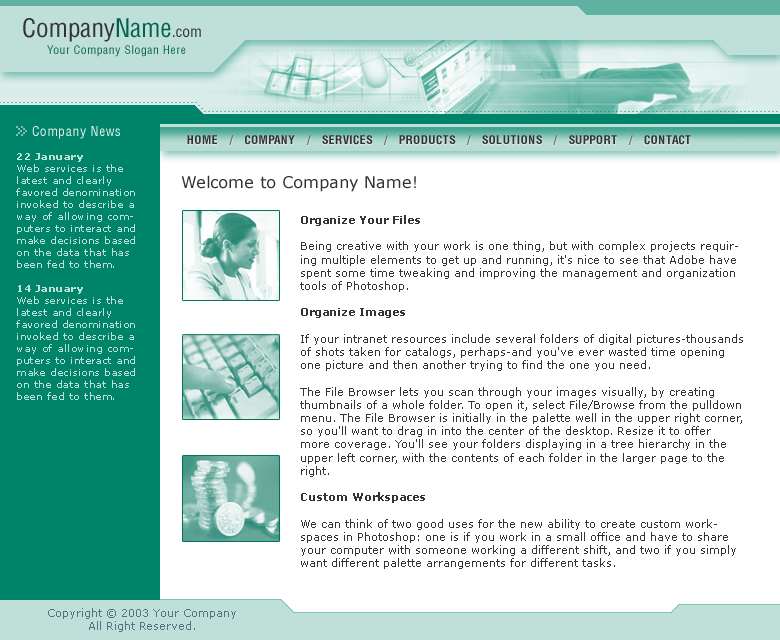
<style>
.page{position:relative;width:780px;height:640px;background:#ffffff}
.page>*{position:absolute;margin:0}
.t1{font:26px "HeliosCond";color:#333333}
.t2{font:26px "HeliosCond";color:#05614e}
.t3{font:16px "HeliosCond";color:#333333}
.t4{font:12px "HeliosCond";letter-spacing:0.05em;color:#116957}
.t5{font:14px "HeliosCond";letter-spacing:0.05em;color:#e6f3f0}
.t6{font:12px "HeliosCondBold";letter-spacing:0.05em;color:#333333;text-transform:uppercase}
.t7{font:12px "HeliosCondBold";letter-spacing:0.05em;color:#666666;text-transform:uppercase}
.t8{font:10px "Verdana";letter-spacing:0.05em;color:#bfe0d9}
.t9{font:10px "Verdana-Bold";letter-spacing:0.05em;color:#bfe0d9}
.t10{font:16px "Verdana";color:#333333}
.t11{font:11px "Verdana";color:#333333}
.t12{font:11px "Verdana-Bold";color:#333333}
.t13{font:11px "Verdana";color:#567280}
</style>
<div class="page">
<p class="t1" style="left:23px;top:18px;width:178px;height:24px">Company<span class="t2">Name</span><span class="t3">.com</span></p>
<p class="t4" style="left:47px;top:45px;width:139px;height:12px">Your Company Slogan Here</p>
<p class="t5" style="left:32px;top:126px;width:88px;height:13px">Company News</p>
<p class="t6" style="left:187px;top:135px;width:504px;height:10px">HOME   <span class="t7">/</span>   Company   <span class="t7">/</span>   Services   <span class="t7">/</span>   Products   <span class="t7">/</span>   Solutions   <span class="t7">/ </span>  Support   <span class="t7">/</span>   Contact</p>
<p class="t8" style="left:16px;top:153px;width:119px;height:247px"><span class="t9">22 January<br></span>Web services is the latest and clearly favored denomination invoked to describe a way of allowing computers to interact and make decisions based on the data that has been fed to them.<br><br><span class="t9">14 January<br></span>Web services is the latest and clearly favored denomination invoked to describe a way of allowing computers to interact and make decisions based on the data that has been fed to them.</p>
<p class="t10" style="left:181px;top:175px;width:235px;height:17px">Welcome to Company Name!</p>
<p class="t11" style="left:300px;top:215px;width:443px;height:354px"><span class="t12">Organize Your Files<br><br></span>Being creative with your work is one thing, but with complex projects requiring multiple elements to get up and running, it's nice to see that Adobe have spent some time tweaking and improving the management and organization tools of Photoshop. <br><br><span class="t12">Organize Images<br><br></span>If your intranet resources include several folders of digital pictures-thousands of shots taken for catalogs, perhaps-and you've ever wasted time opening one picture and then another trying to find the one you need. <br><br>The File Browser lets you scan through your images visually, by creating thumbnails of a whole folder. To open it, select File/Browse from the pulldown menu. The File Browser is initially in the palette well in the upper right corner, so you'll want to drag in into the center of the desktop. Resize it to offer more coverage. You'll see your folders displaying in a tree hierarchy in the upper left corner, with the contents of each folder in the larger page to the right. <br><br><span class="t12">Custom Workspaces<br><br></span>We can think of two good uses for the new ability to create custom workspaces in Photoshop: one is if you work in a small office and have to share your computer with someone working a different shift, and two if you simply want different palette arrangements for different tasks.</p>
<p class="t13" style="left:48px;top:608px;width:188px;height:24px;text-align:center">Copyright © 2003 Your Company<br>All Right Reserved.</p>
</div>
